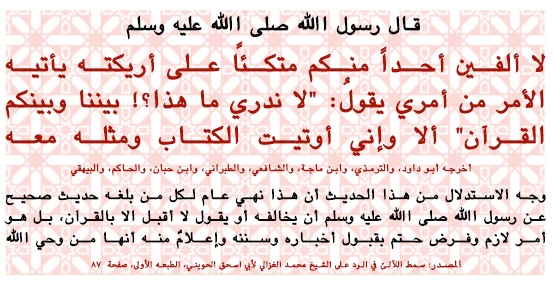
<style>
.page{position:relative;width:554px;height:283px;background:#ffffff}
.page>*{position:absolute;margin:0}
.t1{font:24px "Damascus";letter-spacing:0.05em;color:#070707;font-weight:bold}
.t2{font:30px "Damascus";letter-spacing:0.05em;color:#aa1404;font-weight:bold}
.t3{font:30px "Baghdad";letter-spacing:0.05em;color:#aa1404;font-weight:bold}
.t4{font:30px "AdobeArabic-Regular";letter-spacing:0.05em;color:#aa1404;font-weight:bold}
.t5{font:12px "Damascus";letter-spacing:0.05em;color:#aa1404;font-weight:bold}
.t6{font:18px "Damascus";letter-spacing:0.05em;color:#060606;font-weight:bold}
.t7{font:12px "AdobeArabic-Regular";letter-spacing:0.05em;color:#aa1404;font-weight:bold}
</style>
<div class="page">
<p class="t1" style="left:126px;top:12px;width:295px;height:28px">قال رسول الله صلى الله عليه وسلم</p>
<p class="t2" style="left:5px;top:41px;width:541px;height:116px;text-align:justify">لا ألفين أحداً منكم متكئاً على أريكته يأتيه الأمر من أمري يقولُ<span class="t3">: </span><span class="t4">"</span>لا ندري ما هذا؟<span class="t3">!</span> بيننا وبينكم القرآن<span class="t4">" </span>ألا وإني أوتيت الكتاب ومثله معه</p>
<p class="t5" style="left:71px;top:163px;width:400px;height:14px">أخرجه أبو داود، والترمذي، وابن ماجة، والشافعي، والطبراني، وابن حبان، والحاكم، والبيهقي</p>
<p class="t6" style="left:4px;top:188px;width:542px;height:63px;text-align:justify">وجه الاستدلال من هذا الحديث أن هذا نهي عام لكل من بلغه حديث صحيح عن رسول الله صلى الله عليه وسلم أن يخالفه أو يقول لا أقبل الا بالقرآن، بل هو أمر لازم وفرض حتم بقبول أخباره وسننه وإعلامٌ منه أنها من وحي الله</p>
<p class="t7" style="left:91px;top:259px;width:370px;height:13px"><span class="t5">المصدر</span>: سمط اللآلئ في الرد على الشيخ محمد الغزالي لأبي اسحق الحويني، الطبعه الأولى، صفحة  ٨٧</p>
</div>
